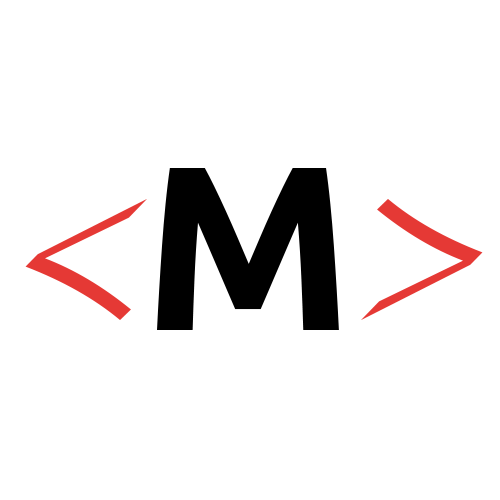
<style>
.page{position:relative;width:500px;height:500px;background:#ffffff}
.page>*{position:absolute;margin:0}
.t1{font:234px "Ubuntu-Bold";color:#000000}
.t2{font:234px "Apple-Chancery";color:#e53935}
</style>
<div class="page">
<p class="t1" style="left:157px;top:168px;width:182px;height:162px">M</p>
<p class="t2" style="left:25px;top:199px;width:122px;height:121px;rotate:180deg">&gt;</p>
<p class="t2" style="left:361px;top:199px;width:122px;height:121px">&gt;</p>
</div>
